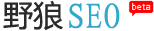
<style>
.page{position:relative;width:154px;height:31px;background:#ffffff}
.page>*{position:absolute;margin:0}
.t1{font:30px "MicrosoftYaHei";color:#2a2a2a}
.t2{font:36px "¾­µä·±Ã«¿¬ Regular";color:#31a7cb}
</style>
<div class="page">
<p class="t1" style="left:3px;top:0px;width:60px;height:30px">野狼</p>
<p class="t2" style="left:69px;top:3px;width:51px;height:26px">SEO</p>
</div>
